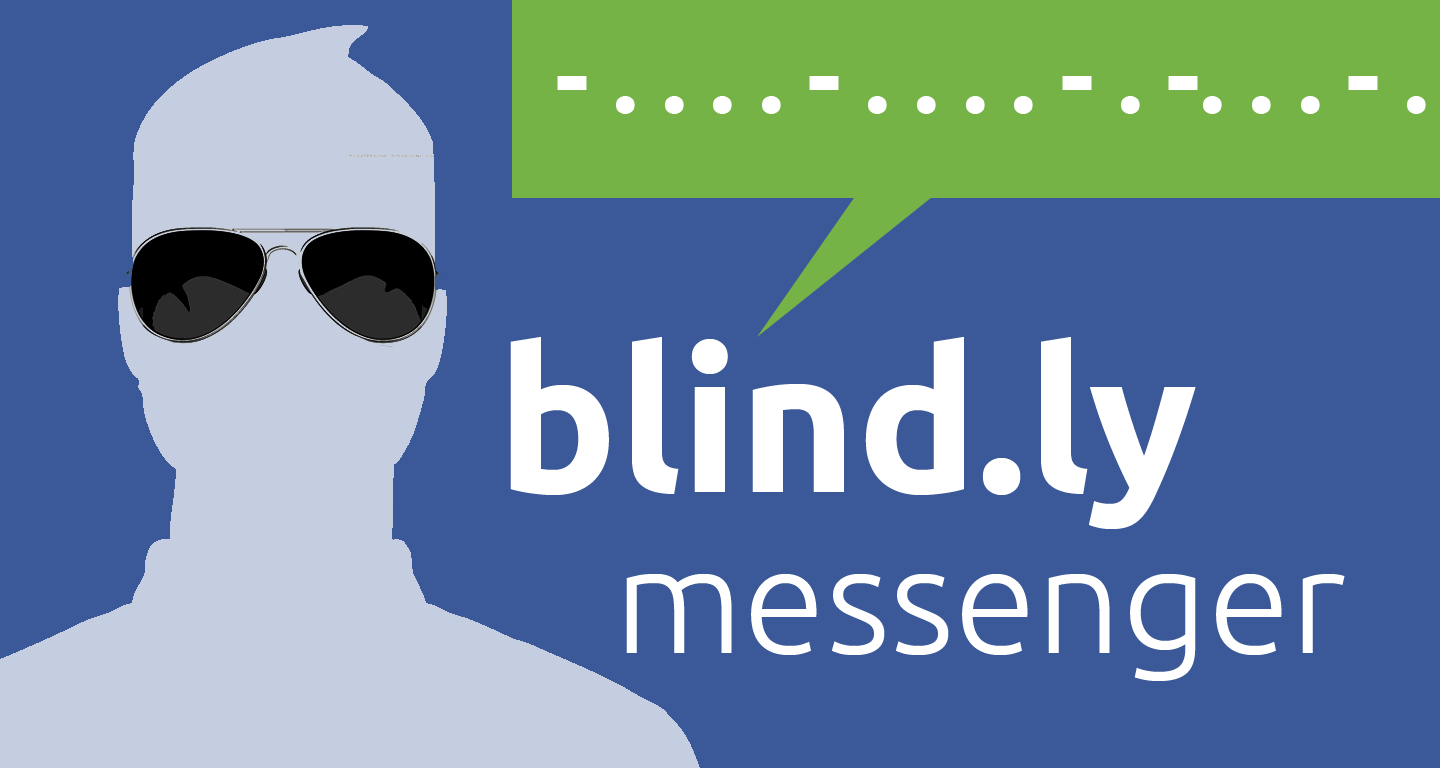
<style>
.page{position:relative;width:1440px;height:768px;background:#3b5998}
.page>*{position:absolute;margin:0}
.t1{font:200px "Ubuntu-Bold";color:#ffffff}
.t2{font:150px "Ubuntu-Light";color:#ffffff}
</style>
<div class="page">
<p class="t1" style="left:510px;top:336px;width:686px;height:193px">blind.ly</p>
<p class="t2" style="left:626px;top:574px;width:719px;height:107px">messenger</p>
</div>
